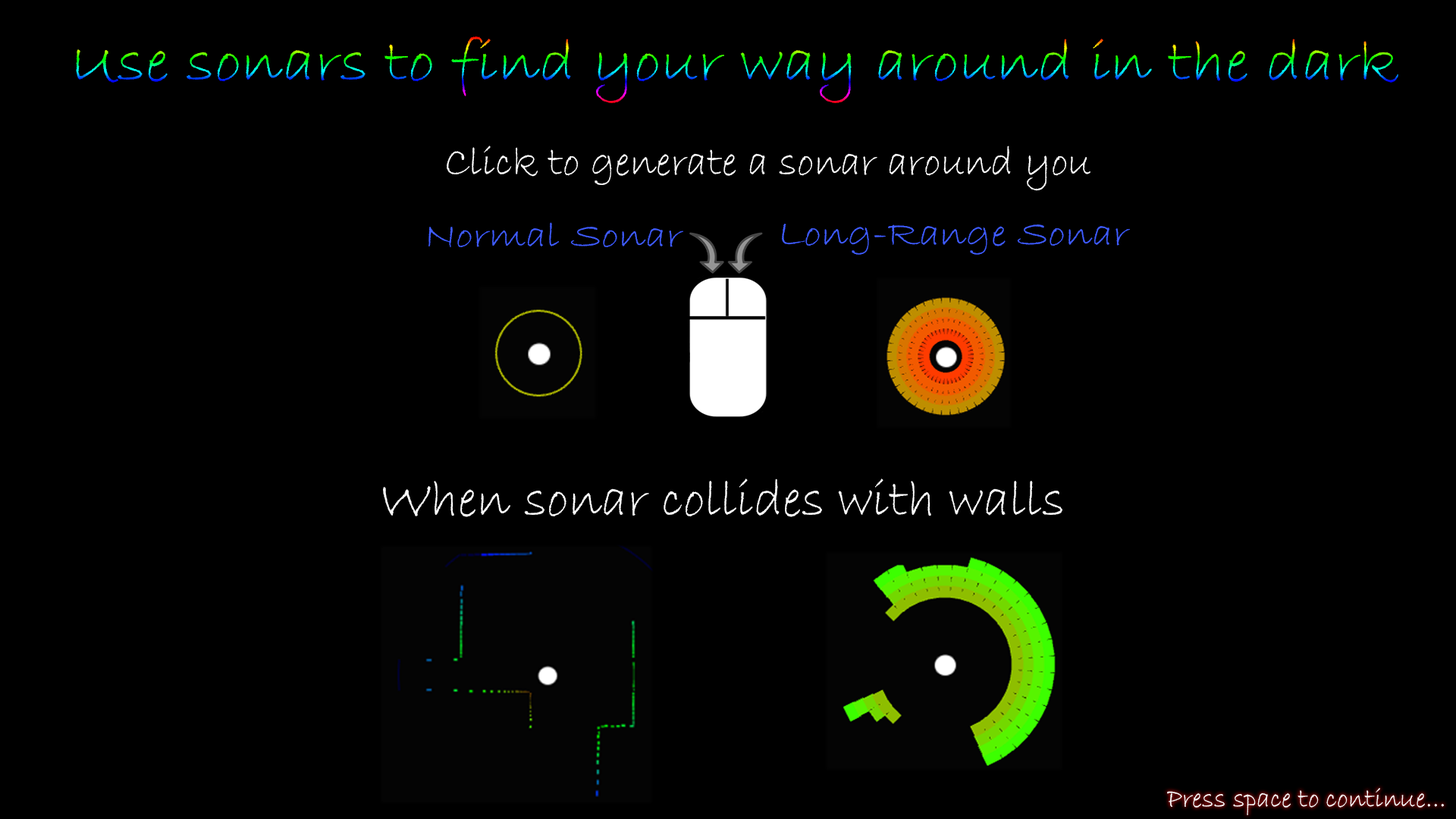
<style>
.page{position:relative;width:1456px;height:819px;background:#000000}
.page>*{position:absolute;margin:0}
.t1{font:60.4px "BradleyHandITC";scale:1.09 1}
.t2{font:41.9px "BradleyHandITC";color:#ffffff}
.t3{font:36.8px "BradleyHandITC";color:#405dff;scale:1.16 1}
.t4{font:38.2px "BradleyHandITC";color:#405dff;scale:1.12 1}
.t5{font:53.2px "BradleyHandITC";color:#ffffff}
.t6{font:27.3px "BradleyHandITC";color:#ffffff}
</style>
<div class="page">
<p class="t1" style="left:76px;top:36px;width:1322px;height:67px">Use sonars to find your way around in the dark</p>
<p class="t2" style="left:447px;top:146px;width:643px;height:45px">Click to generate a sonar around you</p>
<p class="t3" style="left:428px;top:222px;width:255px;height:25px">Normal Sonar</p>
<p class="t4" style="left:782px;top:224px;width:348px;height:31px">Long-Range Sonar</p>
<p class="t5" style="left:383px;top:479px;width:679px;height:38px">When sonar collides with walls</p>
<p class="t6" style="left:1167px;top:788px;width:277px;height:27px">Press space to continue...</p>
</div>
